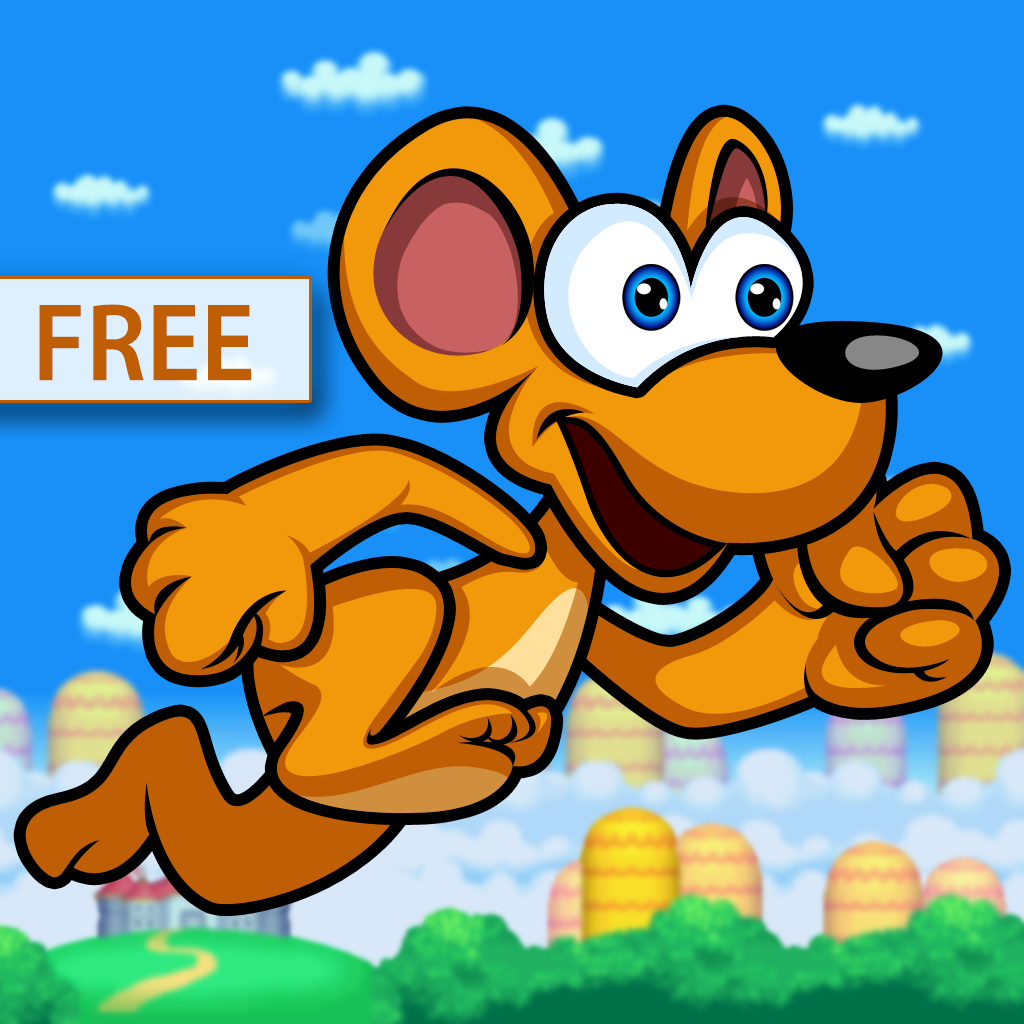
<style>
.page{position:relative;width:1024px;height:1024px;background:#1890f8}
.page>*{position:absolute;margin:0}
.t1{font:111.3px "MyriadPro-Semibold";color:#bf5e05;scale:0.95 1}
</style>
<div class="page">
<p class="t1" style="left:39px;top:304px;width:213px;height:77px">FREE</p>
</div>
